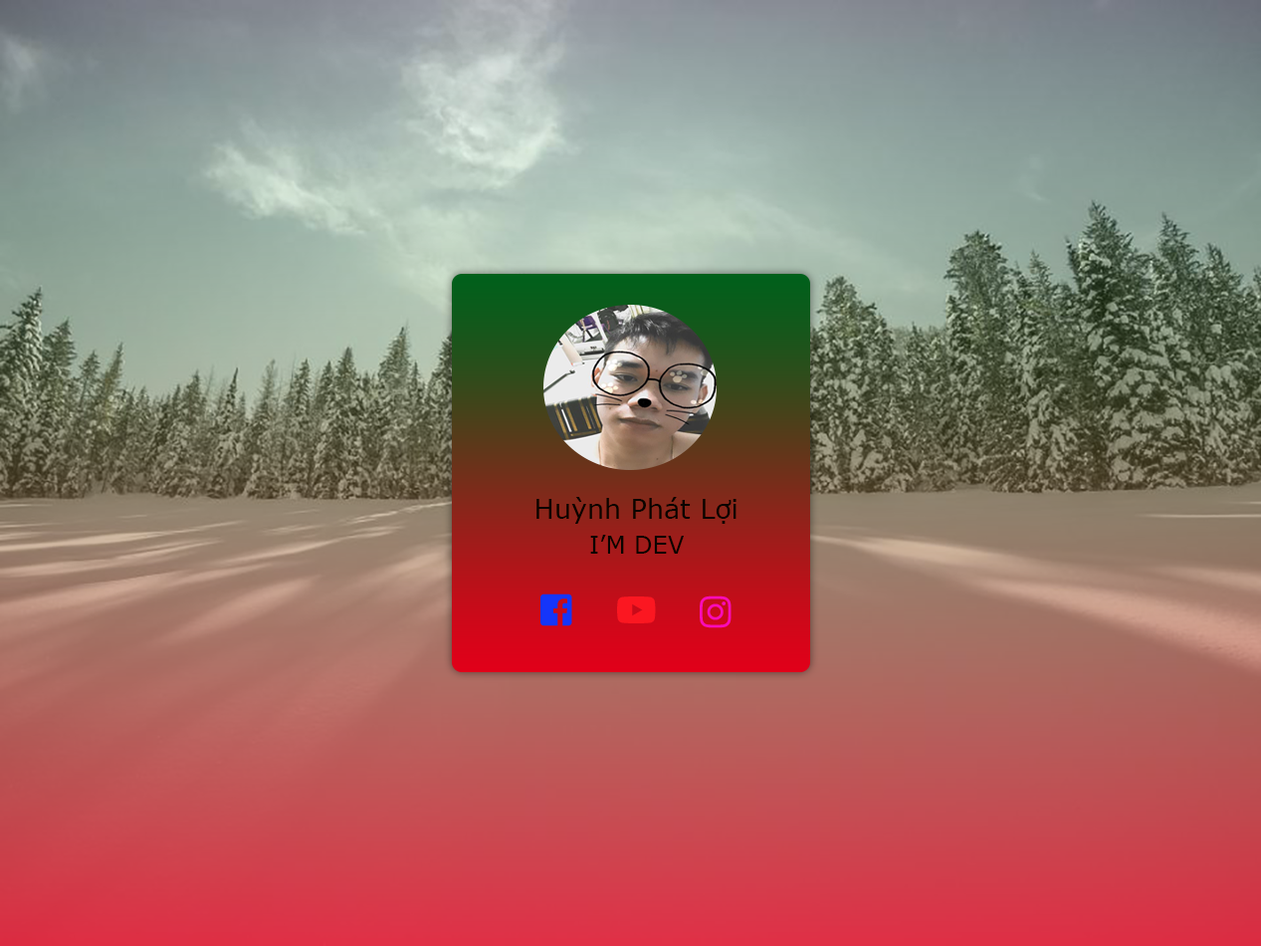
<style>
.page{position:relative;width:1261px;height:946px}
.page>*{position:absolute;margin:0}
.t1{font:26.9px "MSReferenceSansSerif";color:#090400}
.t2{font:23.9px "MSReferenceSansSerif";color:#090400}
</style>
<div class="page">
<p class="t1" style="left:536px;top:497px;width:201px;height:27px">Huỳnh Phát Lợi</p>
<p class="t2" style="left:590px;top:534px;width:94px;height:19px">I’M DEV</p>
</div>
